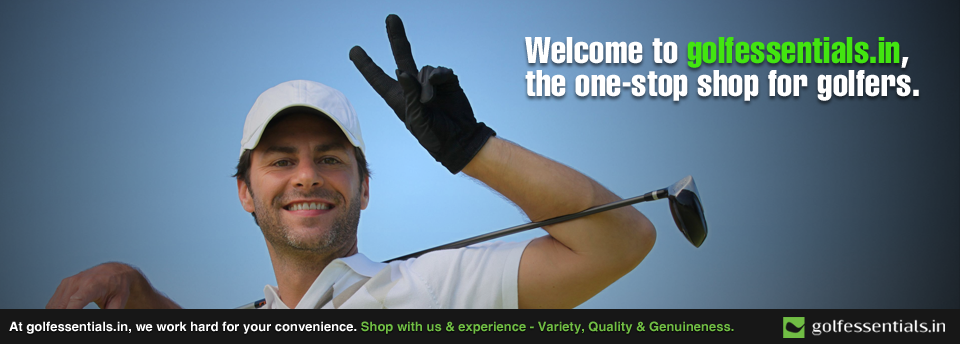
<style>
.page{position:relative;width:960px;height:344px}
.page>*{position:absolute;margin:0}
.t1{font:36.5px/32.7px "HelveticaLT-Compressed";color:#ffffff}
.t2{font:36.5px/32.7px "HelveticaLT-Compressed";color:#42e510}
.t3{font:13px "HelveticaCE-Bold";color:#ffffff}
.t4{font:13px "HelveticaCE-Bold";color:#70be44}
.t5{font:13px "HelveticaCE-Bold";color:#71be44}
</style>
<div class="page">
<p class="t1" style="left:525px;top:37px;width:394px;height:64px">Welcome to <span class="t2">golfessentials.in</span>,<br>the one-stop shop for golfers.</p>
<p class="t3" style="left:9px;top:321px;width:725px;height:13px">At golfessentials.in, we work hard for your convenience. <span class="t4">Shop with us &amp; experience - </span><span class="t5">Variety, Quality &amp; Genuineness</span><span class="t4">.</span></p>
</div>
